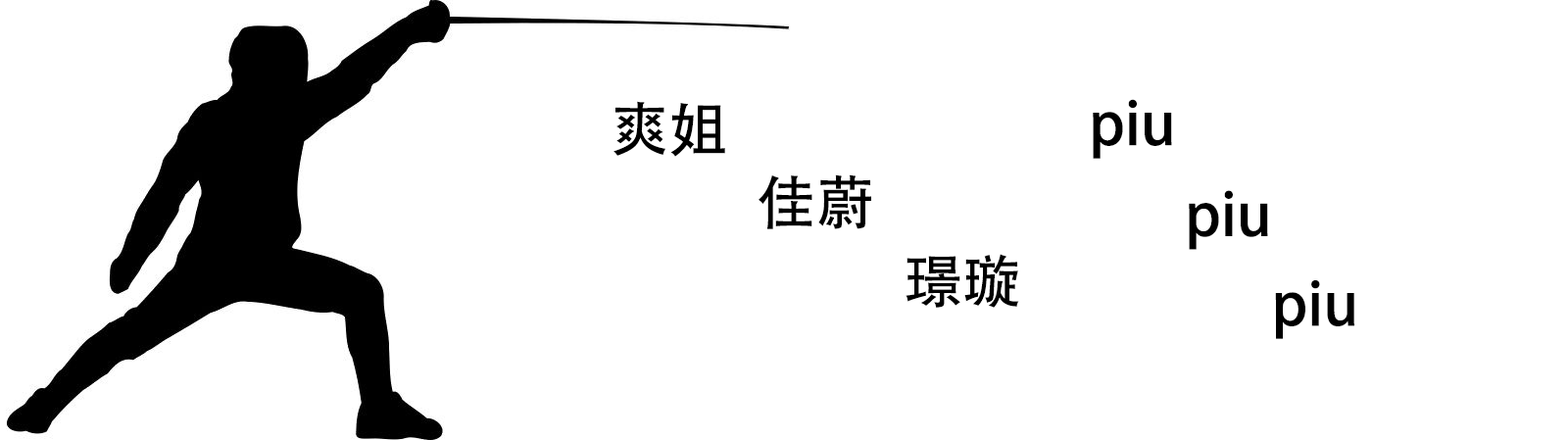
<style>
.page{position:relative;width:1568px;height:440px;background:#ffffff}
.page>*{position:absolute;margin:0}
.t1{font:58.8px "AdobeHeitiStd-Regular";color:#000000}
</style>
<div class="page">
<p class="t1" style="left:613px;top:101px;width:112px;height:56px">爽姐</p>
<p class="t1" style="left:1093px;top:99px;width:79px;height:60px">piu</p>
<p class="t1" style="left:759px;top:174px;width:112px;height:55px">佳蔚</p>
<p class="t1" style="left:1189px;top:190px;width:79px;height:60px">piu</p>
<p class="t1" style="left:906px;top:254px;width:113px;height:54px">璟璇</p>
<p class="t1" style="left:1275px;top:280px;width:79px;height:59px">piu</p>
</div>
